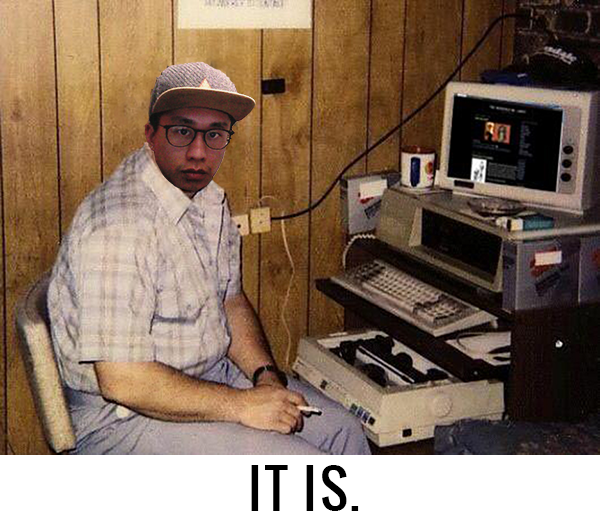
<style>
.page{position:relative;width:600px;height:525px}
.page>*{position:absolute;margin:0}
.t1{font:52.1px "Oswald-Regular";letter-spacing:0.05em;color:#000000}
</style>
<div class="page">
<p class="t1" style="left:251px;top:465px;width:108px;height:46px">IT IS.</p>
</div>
